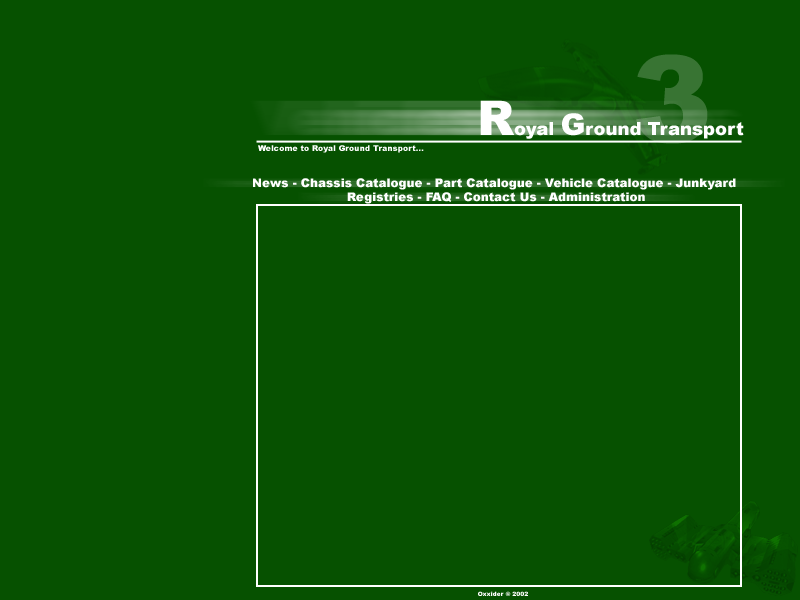
<style>
.page{position:relative;width:800px;height:600px;background:#065100}
.page>*{position:absolute;margin:0}
.t1{font:120px "Arial-Black"}
.t2{font:18px "Arial-Black";color:#ffffff}
.t3{font:48px "Arial-Black";color:#ffffff}
.t4{font:30px "Arial-Black";color:#ffffff}
.t5{font:8px "Arial-Black";color:#ffffff}
.t6{font:12px "Arial-Black";color:#ffffff}
.t7{font:6px "Arial-Black";color:#ffffff}
</style>
<div class="page">
<p class="t1" style="left:636px;top:54px;width:72px;height:90px">3</p>
<p class="t2" style="left:480px;top:100px;width:264px;height:39px"><span class="t3">R</span>oyal <span class="t4">G</span>round Transport</p>
<p class="t5" style="left:258px;top:145px;width:166px;height:8px">Welcome to Royal Ground Transport...</p>
<p class="t6" style="left:253px;top:178px;width:483px;height:26px;text-align:center">News - Chassis Catalogue - Part Catalogue - Vehicle Catalogue - Junkyard <br> Registries - FAQ - Contact Us - Administration</p>
<p class="t7" style="left:478px;top:591px;width:50px;height:5px">Oxxider © 2002</p>
</div>
